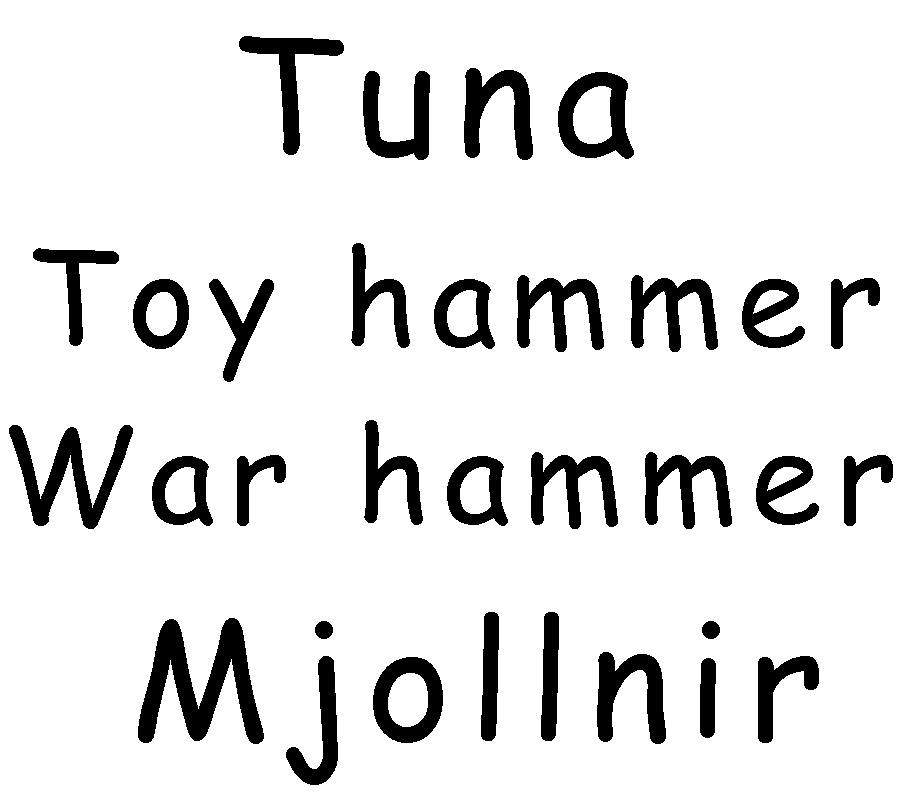
<style>
.page{position:relative;width:900px;height:800px;background:#ffffff}
.page>*{position:absolute;margin:0}
.t1{font:160px "ComicSansMS";letter-spacing:0.1em;color:#000000}
.t2{font:130px "ComicSansMS";letter-spacing:0.1em;color:#000000}
</style>
<div class="page">
<p class="t1" style="left:239px;top:36px;width:395px;height:124px">Tuna</p>
<p class="t2" style="left:33px;top:243px;width:847px;height:139px">Toy hammer</p>
<p class="t2" style="left:9px;top:420px;width:884px;height:109px">War hammer</p>
<p class="t1" style="left:138px;top:612px;width:681px;height:173px">Mjollnir</p>
</div>
